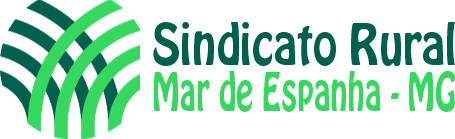
<style>
.page{position:relative;width:455px;height:139px;background:#ffffff}
.page>*{position:absolute;margin:0}
.t1{font:50.5px "HoboStd";color:#00604e;scale:0.87 1}
.t2{font:46.9px "HoboStd";color:#36d75e;scale:0.68 1}
</style>
<div class="page">
<p class="t1" style="left:153px;top:22px;width:302px;height:44px">Sindicato Rural</p>
<p class="t2" style="left:153px;top:70px;width:302px;height:42px">Mar de Espanha - MG</p>
</div>
